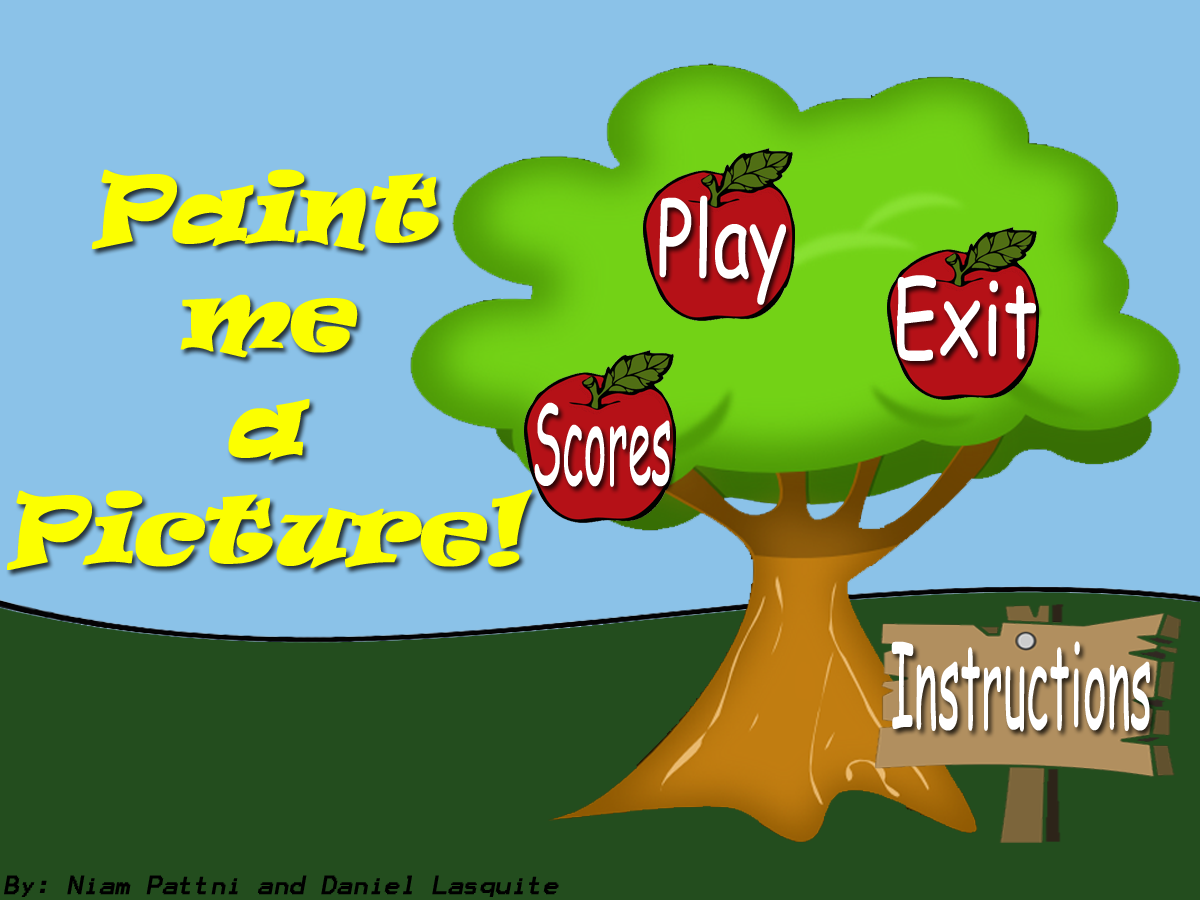
<style>
.page{position:relative;width:1200px;height:900px;background:#8bc2e8}
.page>*{position:absolute;margin:0}
.t1{font:89.2px "Ravie";color:#fcff00;font-weight:bold;font-style:italic}
.t2{font:102px "ComicSansMS";color:#ffffff;scale:0.71 1}
.t3{font:103px "ComicSansMS";color:#ffffff;scale:0.72 1}
.t4{font:111.9px "ComicSansMS";color:#ffffff;scale:0.39 1}
.t5{font:117px "ComicSansMS";color:#ffffff;scale:0.39 1}
.t6{font:21.1px "Terminal";color:#000000;font-weight:bold;font-style:italic}
</style>
<div class="page">
<p class="t1" style="left:7px;top:169px;width:526px;height:401px;text-align:center">Paint<br>me<br>a<br>Picture!</p>
<p class="t2" style="left:659px;top:195px;width:127px;height:110px">Play</p>
<p class="t3" style="left:897px;top:275px;width:139px;height:86px">Exit</p>
<p class="t4" style="left:534px;top:402px;width:136px;height:85px">Scores</p>
<p class="t5" style="left:891px;top:641px;width:259px;height:91px">Instructions</p>
<p class="t6" style="left:4px;top:875px;width:555px;height:22px">By: Niam Pattni and Daniel Lasquite</p>
</div>
